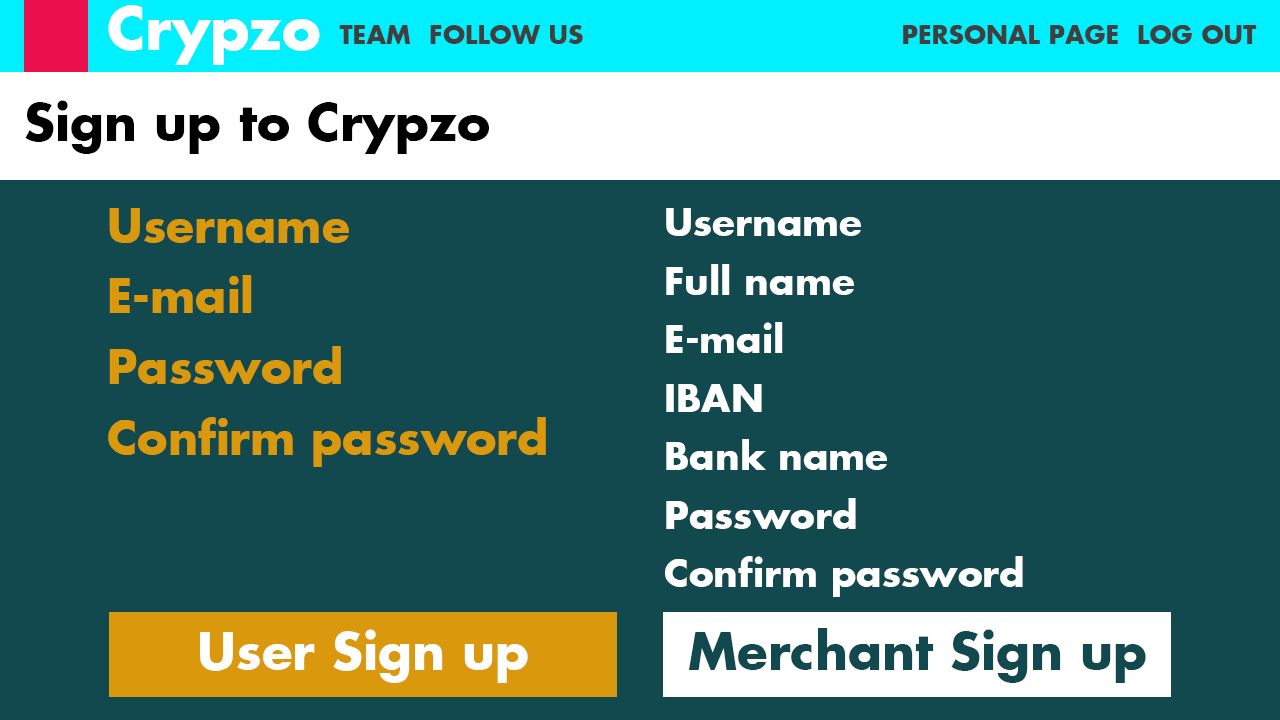
<style>
.page{position:relative;width:1280px;height:720px;background:#11494e}
.page>*{position:absolute;margin:0}
.t1{font:58.3px "FuturaKoyu";color:#ffffff}
.t2{font:25px "FuturaKoyu";color:#404040}
.t3{font:25.4px "FuturaKoyu";color:#404040}
.t4{font:50px "FuturaKoyu";color:#010000}
.t5{font:45.8px/70.9px "FuturaKoyu";color:#da990d}
.t6{font:37.5px/58.5px "FuturaKoyu";color:#ffffff}
.t7{font:49.9px "FuturaKoyu";color:#ffffff}
.t8{font:50px "FuturaKoyu";color:#11494e}
</style>
<div class="page">
<p class="t1" style="left:108px;top:5px;width:212px;height:60px">Crypzo</p>
<p class="t2" style="left:339px;top:25px;width:72px;height:19px">TEAM</p>
<p class="t3" style="left:430px;top:25px;width:153px;height:19px">FOLLOW US</p>
<p class="t3" style="left:903px;top:25px;width:215px;height:19px">PERSONAL PAGE</p>
<p class="t3" style="left:1138px;top:25px;width:119px;height:19px">LOG OUT</p>
<p class="t4" style="left:25px;top:100px;width:464px;height:54px">Sign up to Crypzo</p>
<p class="t5" style="left:108px;top:208px;width:438px;height:259px">Username<br>E-mail<br>Password<br>Confirm password</p>
<p class="t6" style="left:665px;top:208px;width:358px;height:389px">Username<br>Full name<br>E-mail<br>IBAN<br>Bank name<br>Password<br>Confirm password</p>
<p class="t7" style="left:200px;top:629px;width:328px;height:54px">User Sign up</p>
<p class="t8" style="left:689px;top:628px;width:457px;height:55px">Merchant Sign up</p>
</div>
